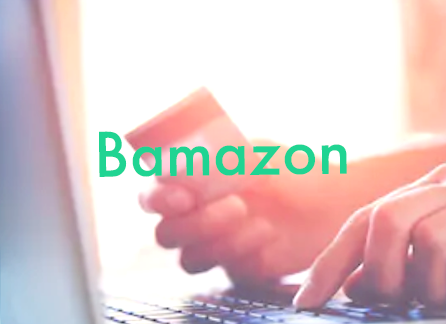
<style>
.page{position:relative;width:446px;height:324px;background:#ffffff}
.page>*{position:absolute;margin:0}
.t1{font:60px "Futura-Medium";color:#20d492}
</style>
<div class="page">
<p class="t1" style="left:99px;top:131px;width:248px;height:46px;rotate:-1deg">Bamazon</p>
</div>
